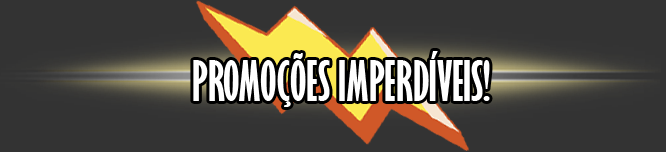
<style>
.page{position:relative;width:666px;height:152px;background:#333333}
.page>*{position:absolute;margin:0}
.t1{font:50.8px "GillSansMT-ExtraCondensedBold";color:#ffffff}
</style>
<div class="page">
<p class="t1" style="left:193px;top:51px;width:297px;height:56px">PROMOÇÕES IMPERDÍVEIS!</p>
</div>
